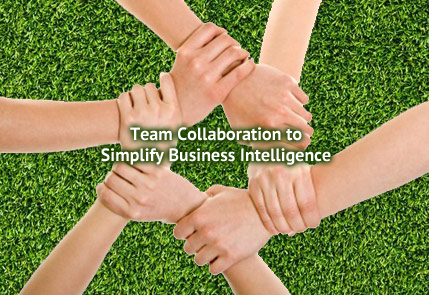
<style>
.page{position:relative;width:429px;height:295px}
.page>*{position:absolute;margin:0}
.t1{font:18px/21.2px "PTSans-Bold";color:#ffffff}
</style>
<div class="page">
<p class="t1" style="left:101px;top:127px;width:230px;height:38px;text-align:center">Team Collaboration to<br>Simplify Business Intelligence</p>
</div>
